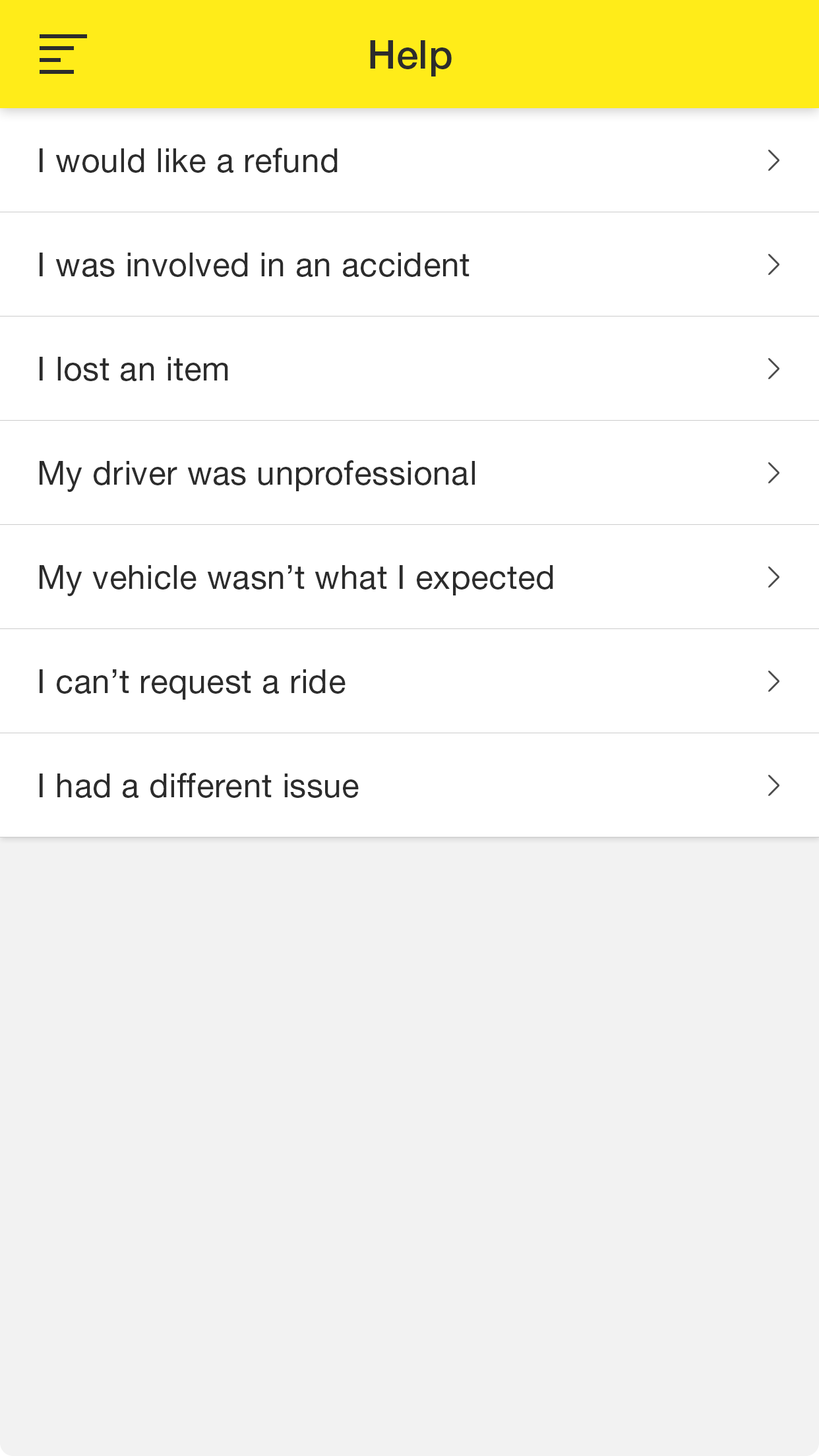
<style>
.page{position:relative;width:819px;height:1456px;background:#ffffff}
.page>*{position:absolute;margin:0}
.t1{font:39.6px "HelveticaNeueLTStd-Md";letter-spacing:0.01em;color:#2c2c2c}
.t2{font:33px "HelveticaNeueLTStd-Roman";letter-spacing:0.01em;color:#2c2c2c}
</style>
<div class="page">
<p class="t1" style="left:370px;top:40px;width:82px;height:36px">Help</p>
<p class="t2" style="left:40px;top:148px;width:298px;height:25px">I would like a refund</p>
<p class="t2" style="left:40px;top:253px;width:430px;height:24px">I was involved in an accident</p>
<p class="t2" style="left:40px;top:357px;width:188px;height:24px">I lost an item</p>
<p class="t2" style="left:40px;top:460px;width:435px;height:32px">My driver was unprofessional</p>
<p class="t2" style="left:40px;top:565px;width:513px;height:31px">My vehicle wasn’t what I expected</p>
<p class="t2" style="left:40px;top:669px;width:306px;height:31px">I can’t request a ride</p>
<p class="t2" style="left:40px;top:773px;width:319px;height:25px">I had a different issue</p>
</div>
